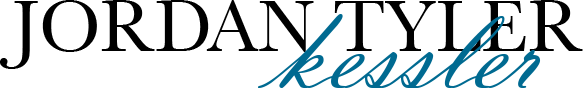
<style>
.page{position:relative;width:583px;height:88px;background:#ffffff}
.page>*{position:absolute;margin:0}
.t1{font:75px "BaskervilleMTTwoBrill";color:#000000}
.t2{font:125px "VladimirScript";color:#006a91}
</style>
<div class="page">
<p class="t1" style="left:0px;top:0px;width:583px;height:69px">JORDAN TYLER</p>
<p class="t2" style="left:258px;top:14px;width:283px;height:74px">kessler</p>
</div>
